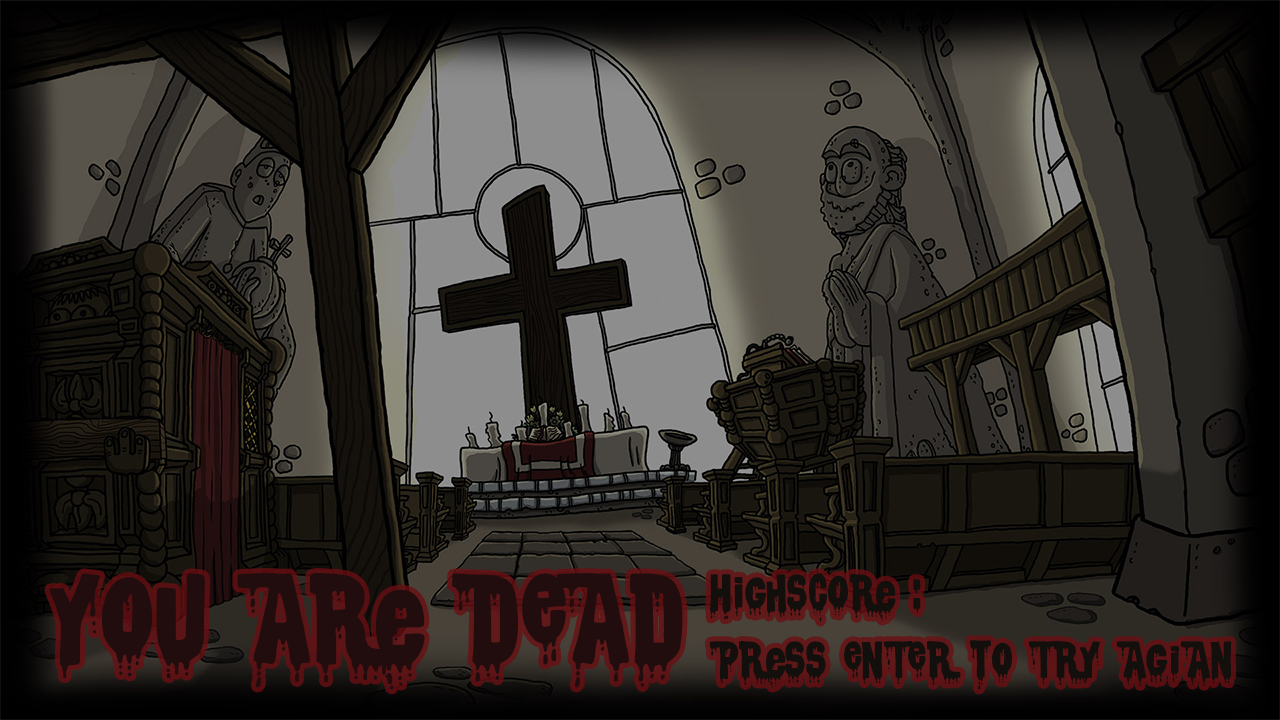
<style>
.page{position:relative;width:1280px;height:720px}
.page>*{position:absolute;margin:0}
.t1{font:114.1px "CSNPWDTNFI";color:#210d0e}
.t2{font:45.8px "CSNPWDTNFI";color:#130f0c}
</style>
<div class="page">
<p class="t1" style="left:49px;top:573px;width:634px;height:117px">You are DEad</p>
<p class="t2" style="left:710px;top:573px;width:211px;height:49px">Highscore :</p>
<p class="t2" style="left:710px;top:640px;width:522px;height:50px">Press ENTER to TRY AGIAN</p>
</div>
